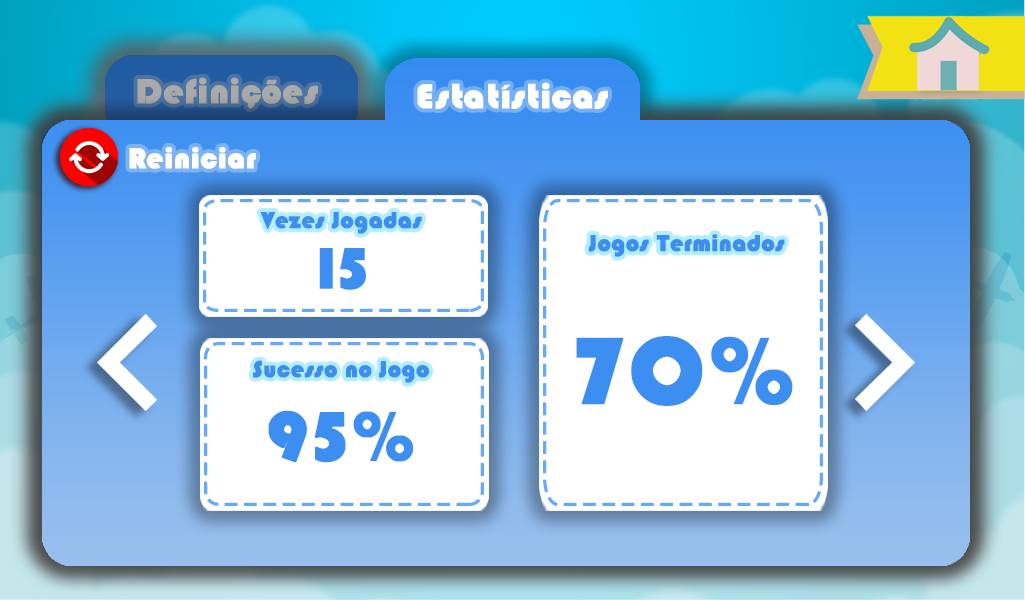
<style>
.page{position:relative;width:1025px;height:600px;background:#ffffff}
.page>*{position:absolute;margin:0}
.t1{font:36px "Blippo-Heavy";color:#ffffff;font-weight:bold}
.t2{font:30px "Blippo-Heavy";color:#ffffff;font-weight:bold}
.t3{font:24px "Blippo-Heavy";color:#3c8ef0;font-weight:bold}
.t4{font:60px "Blippo-Heavy";color:#3c8ef0;font-weight:bold}
.t5{font:98.1px "Blippo-Heavy";color:#3c8ef0;font-weight:bold}
.t6{font:71.9px "Blippo-Heavy";color:#3c8ef0;font-weight:bold}
</style>
<div class="page">
<p class="t1" style="left:417px;top:82px;width:191px;height:27px">Estatísticas</p>
<p class="t2" style="left:129px;top:147px;width:127px;height:22px">Reiniciar</p>
<p class="t3" style="left:260px;top:212px;width:162px;height:22px">Vezes Jogadas</p>
<p class="t3" style="left:588px;top:234px;width:197px;height:23px">Jogos Terminados</p>
<p class="t4" style="left:319px;top:248px;width:47px;height:42px">15</p>
<p class="t5" style="left:576px;top:336px;width:217px;height:70px">70%</p>
<p class="t3" style="left:253px;top:360px;width:176px;height:23px">Sucesso no Jogo</p>
<p class="t6" style="left:268px;top:410px;width:146px;height:53px">95%</p>
</div>
